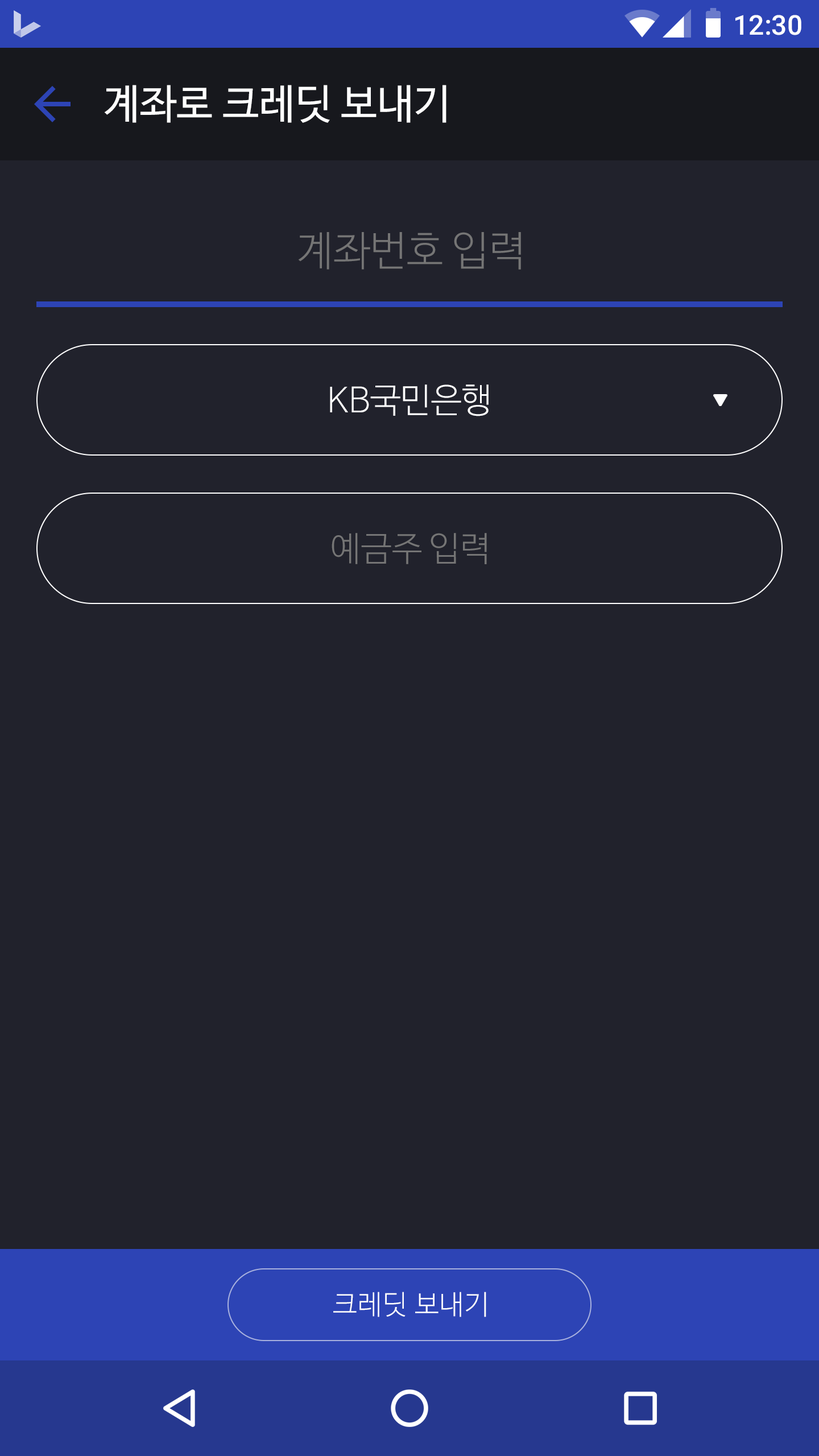
<style>
.page{position:relative;width:819px;height:1456px;background:#21222c}
.page>*{position:absolute;margin:0}
.t1{font:27.3px "Roboto-Medium";color:#ffffff}
.t2{font:40.9px "NanumBarunGothic";color:#ffffff}
.t3{font:40.9px "NanumBarunGothicLight";color:#757575}
.t4{font:34.1px "NanumBarunGothicLight";color:#ffffff}
.t5{font:34.1px "NanumBarunGothicLight";color:#757575}
.t6{font:27.3px "NanumBarunGothicLight";letter-spacing:0.025em;color:#ffffff}
</style>
<div class="page">
<p class="t1" style="left:735px;top:15px;width:66px;height:20px">12:30</p>
<p class="t2" style="left:104px;top:85px;width:342px;height:38px">계좌로 크레딧 보내기</p>
<p class="t3" style="left:298px;top:232px;width:223px;height:38px">계좌번호 입력</p>
<p class="t4" style="left:330px;top:384px;width:159px;height:32px">KB국민은행</p>
<p class="t5" style="left:332px;top:533px;width:155px;height:31px">예금주 입력</p>
<p class="t6" style="left:333px;top:1292px;width:153px;height:25px">크레딧 보내기</p>
</div>
